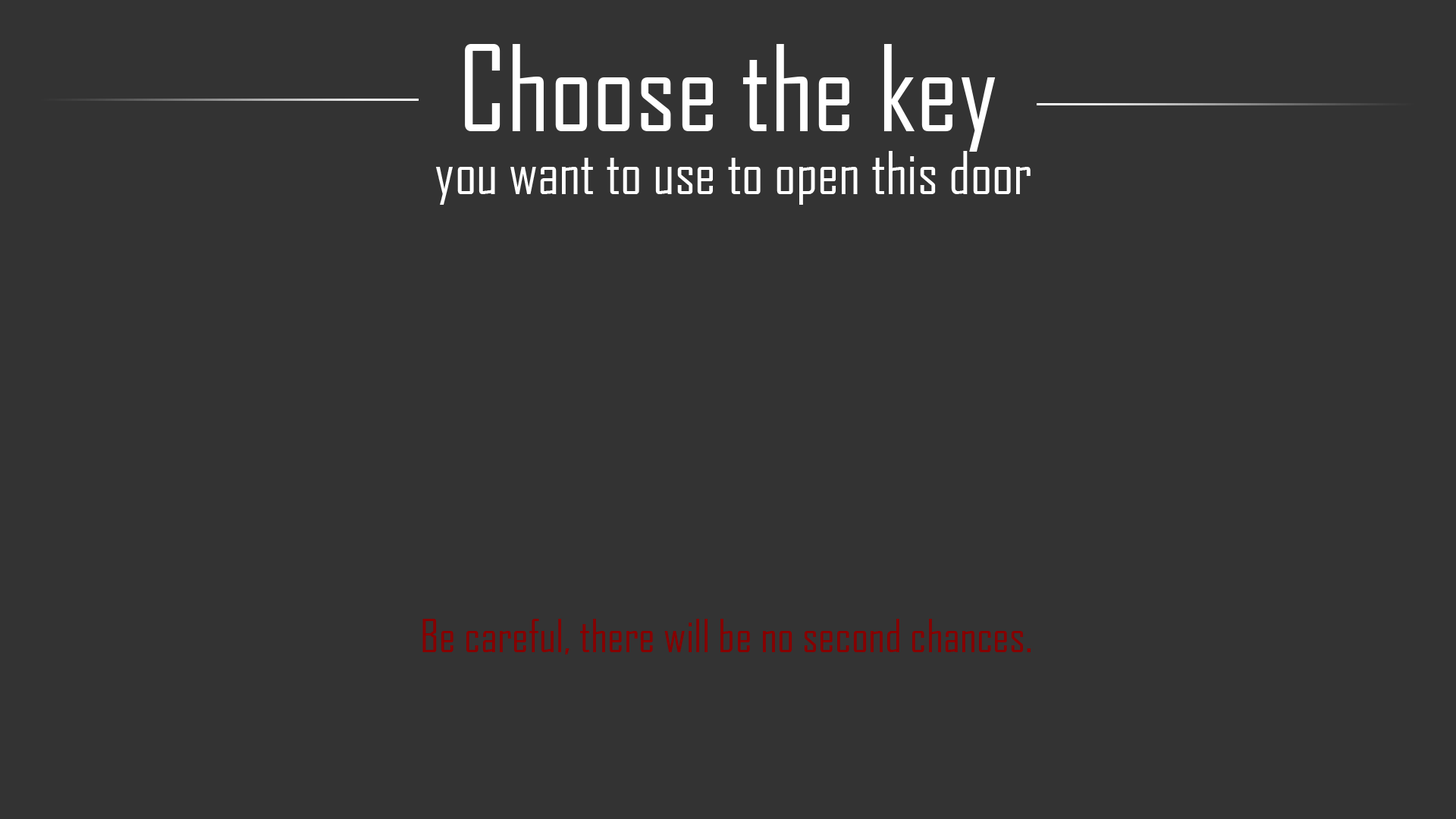
<style>
.page{position:relative;width:1456px;height:819px;background:#333333}
.page>*{position:absolute;margin:0}
.t1{font:56.9px/63.2px "AgencyFB-Reg";color:#ffffff}
.t2{font:113.7px/63.2px "AgencyFB-Reg";color:#ffffff}
.t3{font:44.2px "AgencyFB-Reg";color:#860000}
</style>
<div class="page">
<p class="t1" style="left:436px;top:44px;width:595px;height:161px;text-align:center"><span class="t2">Choose the key<br></span> you want to use to open this door</p>
<p class="t3" style="left:422px;top:619px;width:609px;height:35px">Be careful, there will be no second chances.</p>
</div>
